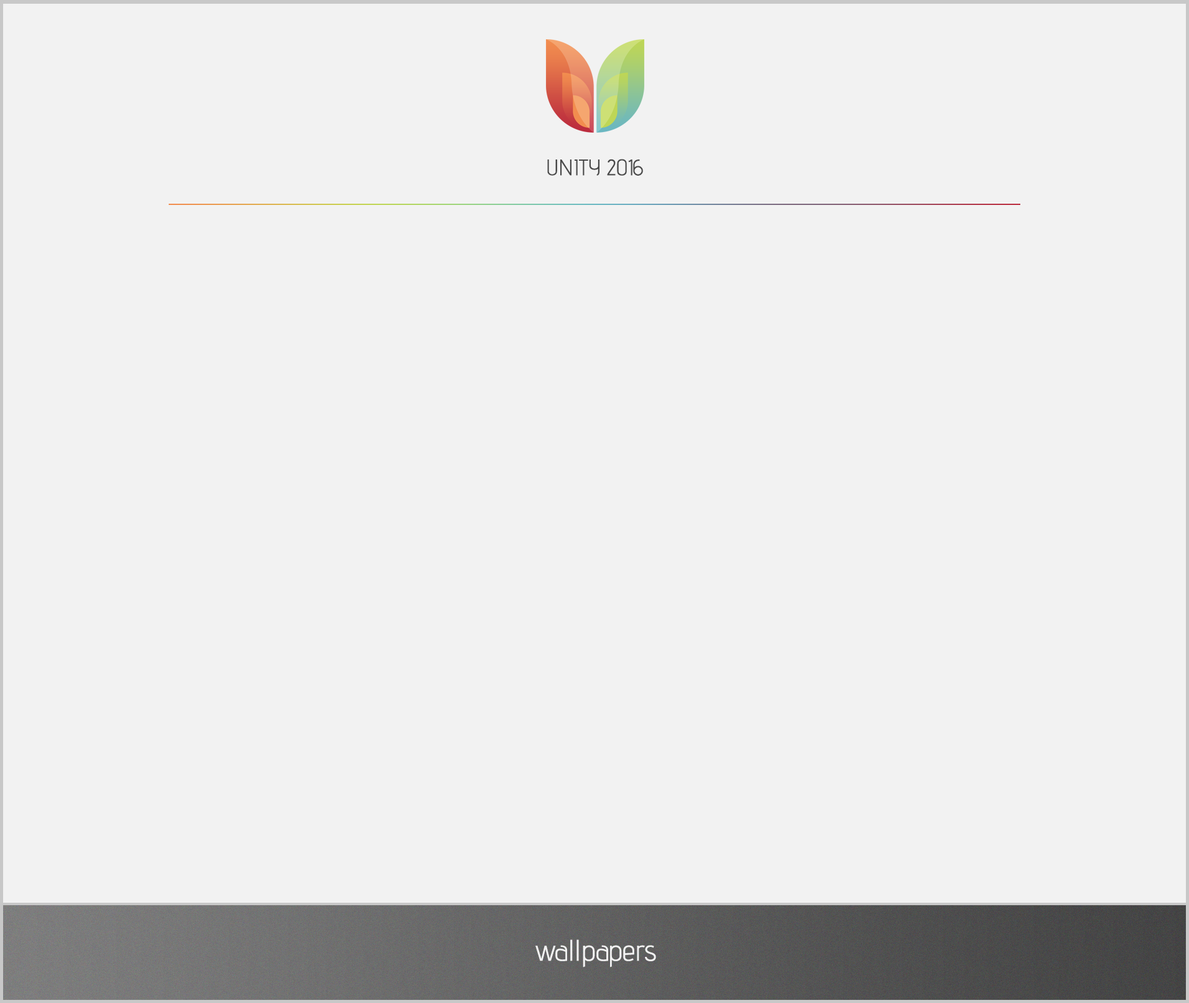
<style>
.page{position:relative;width:1189px;height:1003px;background:#f2f2f2}
.page>*{position:absolute;margin:0}
.t1{font:22.4px "AdventPro-Regular";color:#494949}
.t2{font:29.9px "AdventPro-Regular";color:#f2f2f2}
</style>
<div class="page">
<p class="t1" style="left:547px;top:159px;width:96px;height:17px">UNITY 2016</p>
<p class="t2" style="left:536px;top:939px;width:120px;height:28px">wallpapers</p>
</div>
